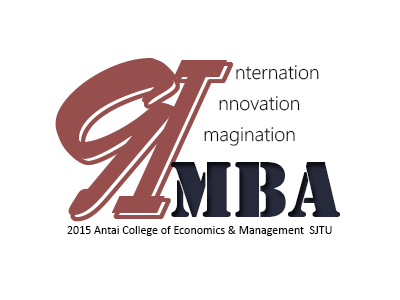
<style>
.page{position:relative;width:400px;height:300px;background:#ffffff}
.page>*{position:absolute;margin:0}
.t1{font:233.3px "BrushScriptStd";color:#964f4c}
.t2{font:18px "FZDX--GB1-4";color:#000000}
.t3{font:72px "StencilStd";color:#262a3b;font-weight:bold}
.t4{font:12px "Calibri";color:#000000}
</style>
<div class="page">
<p class="t1" style="left:55px;top:58px;width:119px;height:158px">9</p>
<p class="t2" style="left:236px;top:65px;width:83px;height:15px">nternation</p>
<p class="t2" style="left:219px;top:96px;width:81px;height:15px">nnovation</p>
<p class="t2" style="left:204px;top:127px;width:91px;height:19px">magination</p>
<p class="t3" style="left:171px;top:162px;width:169px;height:55px">mba</p>
<p class="t4" style="left:67px;top:226px;width:265px;height:10px">2015 Antai College of Economics &amp; Management  SJTU</p>
</div>
